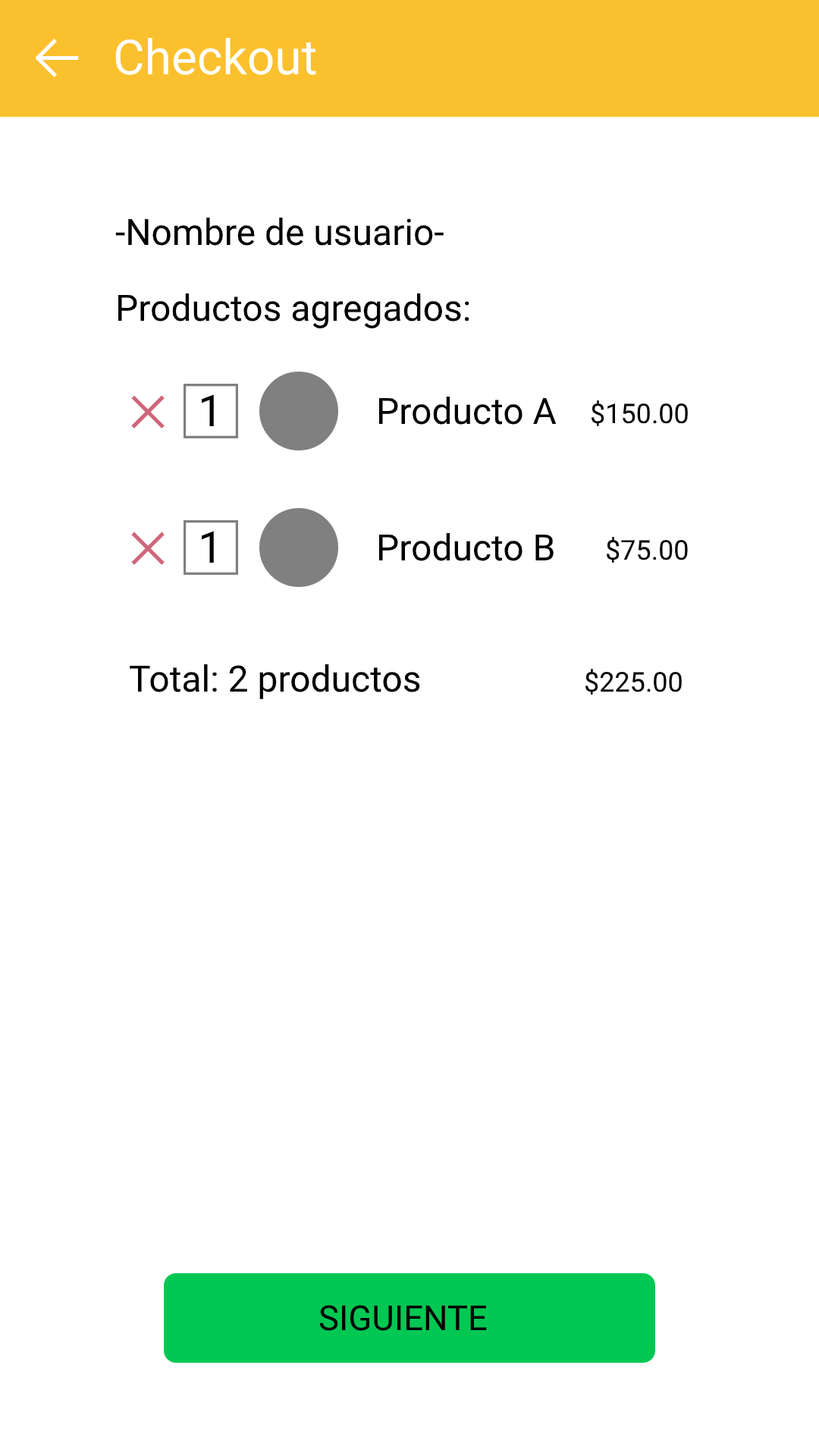
<style>
.page{position:relative;width:819px;height:1456px;background:#ffffff}
.page>*{position:absolute;margin:0}
.t1{font:48.5px "Roboto-Regular";color:#ffffff}
.t2{font:36.4px "Roboto-Regular";color:#000000}
.t3{font:27.3px "Roboto-Regular";color:#000000}
.t4{font:34.5px "Roboto-Regular";color:#000000}
</style>
<div class="page">
<p class="t1" style="left:115px;top:38px;width:201px;height:37px">Checkout</p>
<p class="t2" style="left:115px;top:218px;width:329px;height:28px">-Nombre de usuario-</p>
<p class="t2" style="left:118px;top:293px;width:351px;height:35px">Productos agregados:</p>
<p class="t2" style="left:378px;top:397px;width:179px;height:28px">Producto A</p>
<p class="t3" style="left:591px;top:400px;width:97px;height:26px">$150.00</p>
<p class="t2" style="left:378px;top:533px;width:176px;height:28px">Producto B</p>
<p class="t3" style="left:607px;top:537px;width:81px;height:26px">$75.00</p>
<p class="t2" style="left:130px;top:664px;width:290px;height:35px">Total: 2 productos</p>
<p class="t3" style="left:585px;top:669px;width:97px;height:26px">$225.00</p>
<p class="t4" style="left:319px;top:1305px;width:168px;height:26px">SIGUIENTE</p>
</div>
